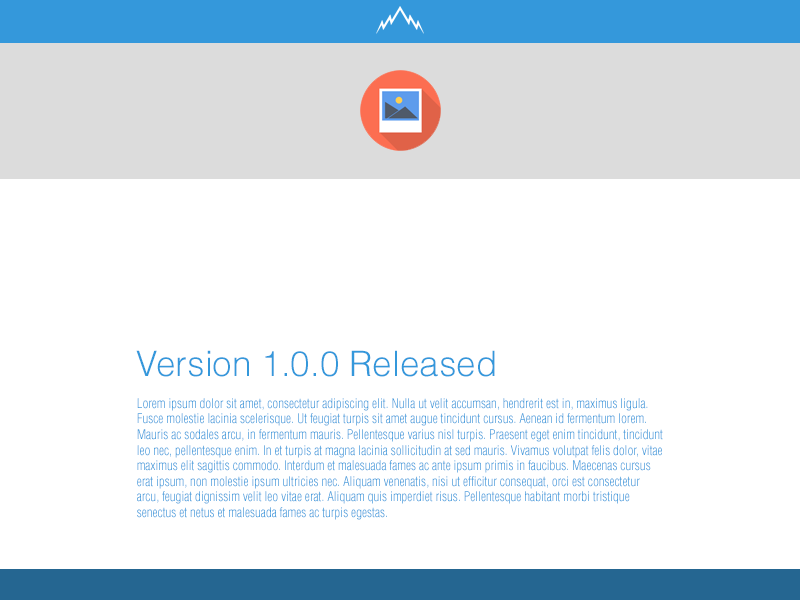
<style>
.page{position:relative;width:800px;height:600px;background:#ffffff}
.page>*{position:absolute;margin:0}
.t1{font:35.1px "HelveticaLTStd-Light";color:#3498db}
.t2{font:13px "HelveticaLTStd-LightCond";color:#3498db}
</style>
<div class="page">
<p class="t1" style="left:136px;top:350px;width:359px;height:27px">Version 1.0.0 Released</p>
<p class="t2" style="left:137px;top:398px;width:526px;height:122px">Lorem ipsum dolor sit amet, consectetur adipiscing elit. Nulla ut velit accumsan, hendrerit est in, maximus ligula. Fusce molestie lacinia scelerisque. Ut feugiat turpis sit amet augue tincidunt cursus. Aenean id fermentum lorem. Mauris ac sodales arcu, in fermentum mauris. Pellentesque varius nisl turpis. Praesent eget enim tincidunt, tincidunt leo nec, pellentesque enim. In et turpis at magna lacinia sollicitudin at sed mauris. Vivamus volutpat felis dolor, vitae maximus elit sagittis commodo. Interdum et malesuada fames ac ante ipsum primis in faucibus. Maecenas cursus erat ipsum, non molestie ipsum ultricies nec. Aliquam venenatis, nisi ut efficitur consequat, orci est consectetur arcu, feugiat dignissim velit leo vitae erat. Aliquam quis imperdiet risus. Pellentesque habitant morbi tristique senectus et netus et malesuada fames ac turpis egestas.</p>
</div>
